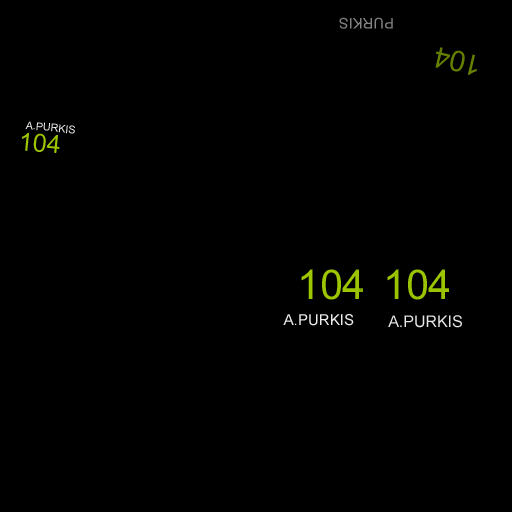
<style>
.page{position:relative;width:512px;height:512px;background:#000000}
.page>*{position:absolute;margin:0}
.t1{font:14.9px "ArialMT";color:#838383}
.t2{font:28.7px "ArialMT";color:#658000}
.t3{font:10.7px "ArialMT";color:#ffffff}
.t4{font:25.2px "ArialMT";color:#a9d500}
.t5{font:41.3px "ArialMT";color:#a9d500}
.t6{font:15.1px "ArialMT";color:#ffffff}
.t7{font:16px "ArialMT";color:#ffffff}
</style>
<div class="page">
<p class="t1" style="left:339px;top:17px;width:54px;height:12px;rotate:180deg">PURKIS</p>
<p class="t2" style="left:435px;top:47px;width:42px;height:28px;rotate:-167deg">104</p>
<p class="t3" style="left:25px;top:121px;width:50px;height:13px;rotate:6deg">A.PURKIS</p>
<p class="t4" style="left:21px;top:132px;width:39px;height:21px;rotate:6deg">104</p>
<p class="t5" style="left:301px;top:269px;width:62px;height:31px">104</p>
<p class="t5" style="left:387px;top:269px;width:62px;height:31px">104</p>
<p class="t6" style="left:283px;top:314px;width:71px;height:12px">A.PURKIS</p>
<p class="t7" style="left:388px;top:315px;width:74px;height:13px">A.PURKIS</p>
</div>
